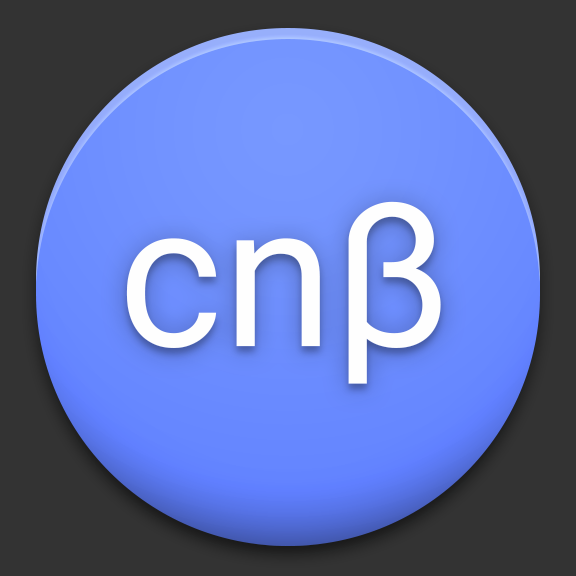
<style>
.page{position:relative;width:576px;height:576px;background:#333333}
.page>*{position:absolute;margin:0}
.t1{font:200px "Roboto-Regular";color:#fefefe}
</style>
<div class="page">
<p class="t1" style="left:126px;top:201px;width:315px;height:183px">cnβ</p>
</div>
